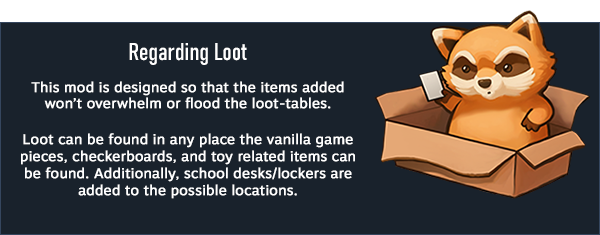
<style>
.page{position:relative;width:600px;height:235px;background:#19222c}
.page>*{position:absolute;margin:0}
.t1{font:14px "MotivaSans-Regular";color:#ffffff;font-weight:bold}
.t2{font:24px "Bahnschrift-Condensed";color:#ffffff;font-weight:bold}
</style>
<div class="page">
<p class="t1" style="left:21px;top:43px;width:334px;height:156px;text-align:center"><span class="t2">Regarding Loot<br> <br><br></span>This mod is designed so that the items added <br>won’t overwhelm or flood the loot-tables.<br> <br><br>Loot can be found in any place the vanilla game pieces, checkerboards, and toy related items can be found. Additionally, school desks/lockers are added to the possible locations.</p>
</div>
